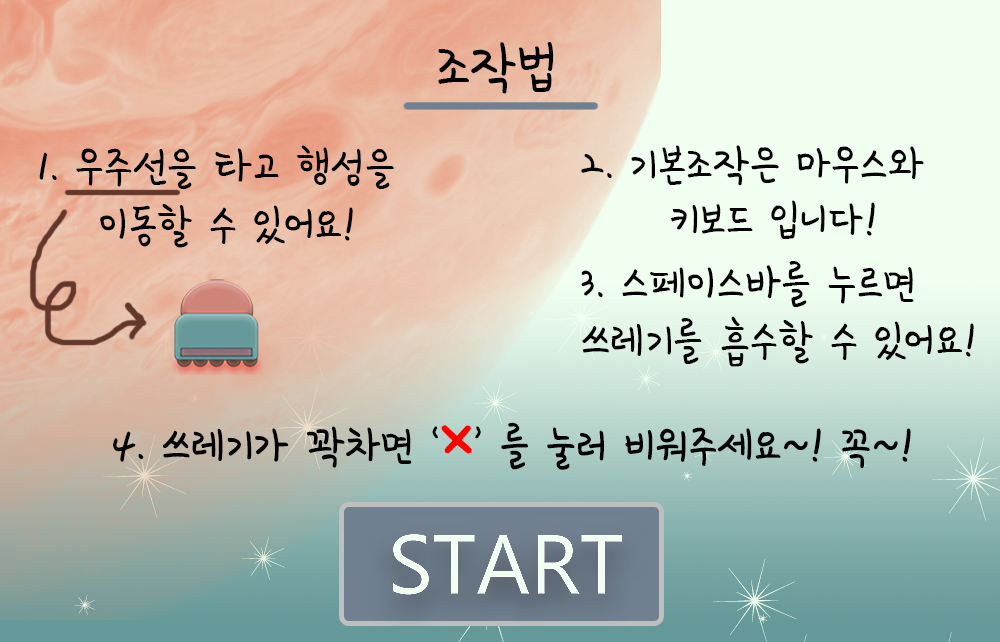
<style>
.page{position:relative;width:1000px;height:642px}
.page>*{position:absolute;margin:0}
.t1{font:75px "SDMiSaeng";color:#000000}
.t2{font:58.3px "SDMiSaeng";color:#000000}
.t3{font:100px "SDMiSaeng";color:#ff0000}
</style>
<div class="page">
<p class="t1" style="left:438px;top:42px;width:116px;height:52px">조작법</p>
<p class="t2" style="left:39px;top:145px;width:355px;height:44px">1. 우주선을 타고 행성을</p>
<p class="t2" style="left:581px;top:145px;width:343px;height:41px">2. 기본조작은 마우스와</p>
<p class="t2" style="left:100px;top:204px;width:253px;height:44px">이동할 수 있어요!</p>
<p class="t2" style="left:671px;top:200px;width:204px;height:39px">키보드 입니다!</p>
<p class="t2" style="left:581px;top:261px;width:333px;height:46px">3. 스페이스바를 누르면</p>
<p class="t2" style="left:582px;top:316px;width:392px;height:51px">쓰레기를 흡수할 수 있어요!</p>
<p class="t2" style="left:113px;top:422px;width:798px;height:48px">4. 쓰레기가 꽉차면 ‘<span class="t3">x</span>’ 를 눌러 비워주세요~! 꼭~!</p>
</div>
